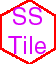
<style>
.page{position:relative;width:56px;height:64px;background:#ffffff}
.page>*{position:absolute;margin:0}
.t1{font:24px "Helvetica";color:#d900f9}
</style>
<div class="page">
<p class="t1" style="left:8px;top:7px;width:38px;height:47px;text-align:center">SS<br>Tile</p>
</div>
